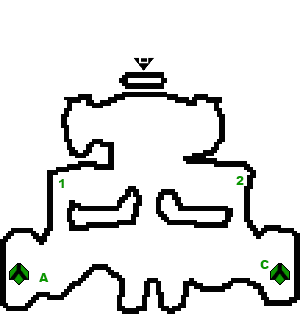
<style>
.page{position:relative;width:300px;height:314px;background:#ffffff}
.page>*{position:absolute;margin:0}
.t1{font:12px "Arial-Black";color:#0c9801}
</style>
<div class="page">
<p class="t1" style="left:59px;top:179px;width:5px;height:9px">1</p>
<p class="t1" style="left:236px;top:176px;width:8px;height:9px">2</p>
<p class="t1" style="left:260px;top:260px;width:9px;height:9px">C</p>
<p class="t1" style="left:39px;top:273px;width:10px;height:9px">A</p>
</div>
